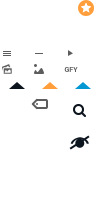
<style>
.page{position:relative;width:99px;height:203px;background:#ffffff}
.page>*{position:absolute;margin:0}
.t1{font:7px "Roboto-Bold";color:#5d5d5d}
</style>
<div class="page">
<p class="t1" style="left:64px;top:67px;width:14px;height:5px">GFY</p>
</div>
